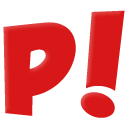
<style>
.page{position:relative;width:128px;height:128px;background:#ffffff}
.page>*{position:absolute;margin:0}
.t1{font:110px "GROBOLD";letter-spacing:-0.2em;color:#d81818}
</style>
<div class="page">
<p class="t1" style="left:3px;top:10px;width:122px;height:108px">P!</p>
</div>
